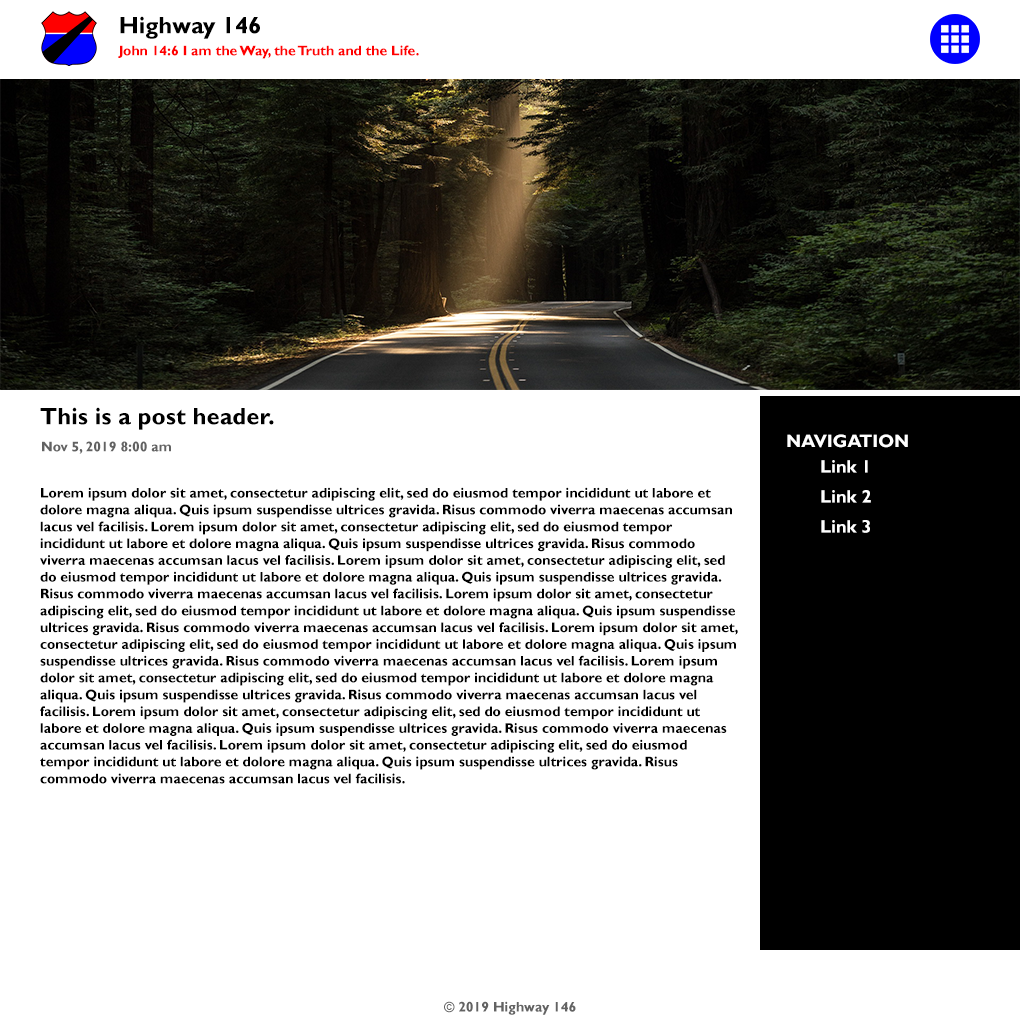
<style>
.page{position:relative;width:1020px;height:1020px;background:#ffffff}
.page>*{position:absolute;margin:0}
.t1{font:24px "GillSansMT-Bold";color:#000000}
.t2{font:14px "GillSansMT-Bold";color:#ff0000}
.t3{font:18px "GillSansMT-Bold";color:#ffffff}
.t4{font:14px "GillSansMT-Bold";color:#626262}
.t5{font:14px "GillSansMT-Bold";color:#000000}
</style>
<div class="page">
<p class="t1" style="left:120px;top:16px;width:140px;height:23px">Highway 146</p>
<p class="t2" style="left:118px;top:45px;width:301px;height:14px">John 14:6 I am the Way, the Truth and the Life.</p>
<p class="t1" style="left:40px;top:407px;width:234px;height:23px">This is a post header.</p>
<p class="t3" style="left:787px;top:434px;width:121px;height:14px">NAVIGATION</p>
<p class="t4" style="left:42px;top:441px;width:129px;height:13px">Nov 5, 2019 8:00 am</p>
<p class="t3" style="left:821px;top:460px;width:47px;height:13px">Link 1</p>
<p class="t5" style="left:40px;top:487px;width:698px;height:297px">Lorem ipsum dolor sit amet, consectetur adipiscing elit, sed do eiusmod tempor incididunt ut labore et dolore magna aliqua. Quis ipsum suspendisse ultrices gravida. Risus commodo viverra maecenas accumsan lacus vel facilisis. Lorem ipsum dolor sit amet, consectetur adipiscing elit, sed do eiusmod tempor incididunt ut labore et dolore magna aliqua. Quis ipsum suspendisse ultrices gravida. Risus commodo viverra maecenas accumsan lacus vel facilisis. Lorem ipsum dolor sit amet, consectetur adipiscing elit, sed do eiusmod tempor incididunt ut labore et dolore magna aliqua. Quis ipsum suspendisse ultrices gravida. Risus commodo viverra maecenas accumsan lacus vel facilisis. Lorem ipsum dolor sit amet, consectetur adipiscing elit, sed do eiusmod tempor incididunt ut labore et dolore magna aliqua. Quis ipsum suspendisse ultrices gravida. Risus commodo viverra maecenas accumsan lacus vel facilisis. Lorem ipsum dolor sit amet, consectetur adipiscing elit, sed do eiusmod tempor incididunt ut labore et dolore magna aliqua. Quis ipsum suspendisse ultrices gravida. Risus commodo viverra maecenas accumsan lacus vel facilisis. Lorem ipsum dolor sit amet, consectetur adipiscing elit, sed do eiusmod tempor incididunt ut labore et dolore magna aliqua. Quis ipsum suspendisse ultrices gravida. Risus commodo viverra maecenas accumsan lacus vel facilisis. Lorem ipsum dolor sit amet, consectetur adipiscing elit, sed do eiusmod tempor incididunt ut labore et dolore magna aliqua. Quis ipsum suspendisse ultrices gravida. Risus commodo viverra maecenas accumsan lacus vel facilisis. Lorem ipsum dolor sit amet, consectetur adipiscing elit, sed do eiusmod tempor incididunt ut labore et dolore magna aliqua. Quis ipsum suspendisse ultrices gravida. Risus commodo viverra maecenas accumsan lacus vel facilisis.</p>
<p class="t3" style="left:821px;top:490px;width:50px;height:13px">Link 2</p>
<p class="t3" style="left:821px;top:520px;width:49px;height:13px">Link 3</p>
<p class="t4" style="left:444px;top:1001px;width:132px;height:14px">© 2019 Highway 146</p>
</div>
